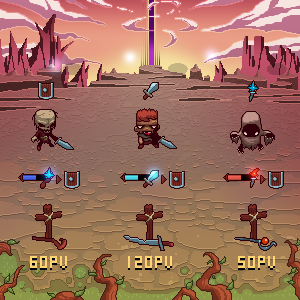
<style>
.page{position:relative;width:300px;height:300px}
.page>*{position:absolute;margin:0}
.t1{font:24px "wendy";color:#ffd673}
.t2{font:24px "wendy";color:#02050b}
</style>
<div class="page">
<p class="t1" style="left:30px;top:256px;width:37px;height:12px">60PV</p>
<p class="t1" style="left:128px;top:256px;width:44px;height:12px">120PV</p>
<p class="t1" style="left:238px;top:256px;width:37px;height:12px">50PV</p>
<p class="t2" style="left:30px;top:258px;width:37px;height:12px">60PV</p>
<p class="t2" style="left:128px;top:258px;width:44px;height:12px">120PV</p>
<p class="t2" style="left:238px;top:258px;width:37px;height:12px">50PV</p>
</div>
